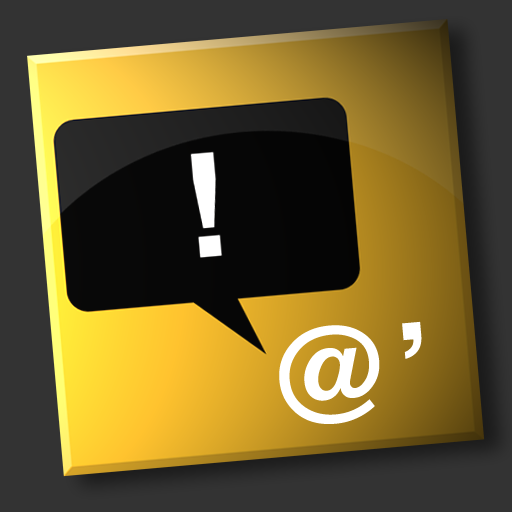
<style>
.page{position:relative;width:512px;height:512px;background:#333333}
.page>*{position:absolute;margin:0}
.t1{font:128.2px "Helvetica-Bold";letter-spacing:0.05em;color:#ffffff}
</style>
<div class="page">
<p class="t1" style="left:279px;top:321px;width:143px;height:103px;rotate:-5deg">@’</p>
</div>
